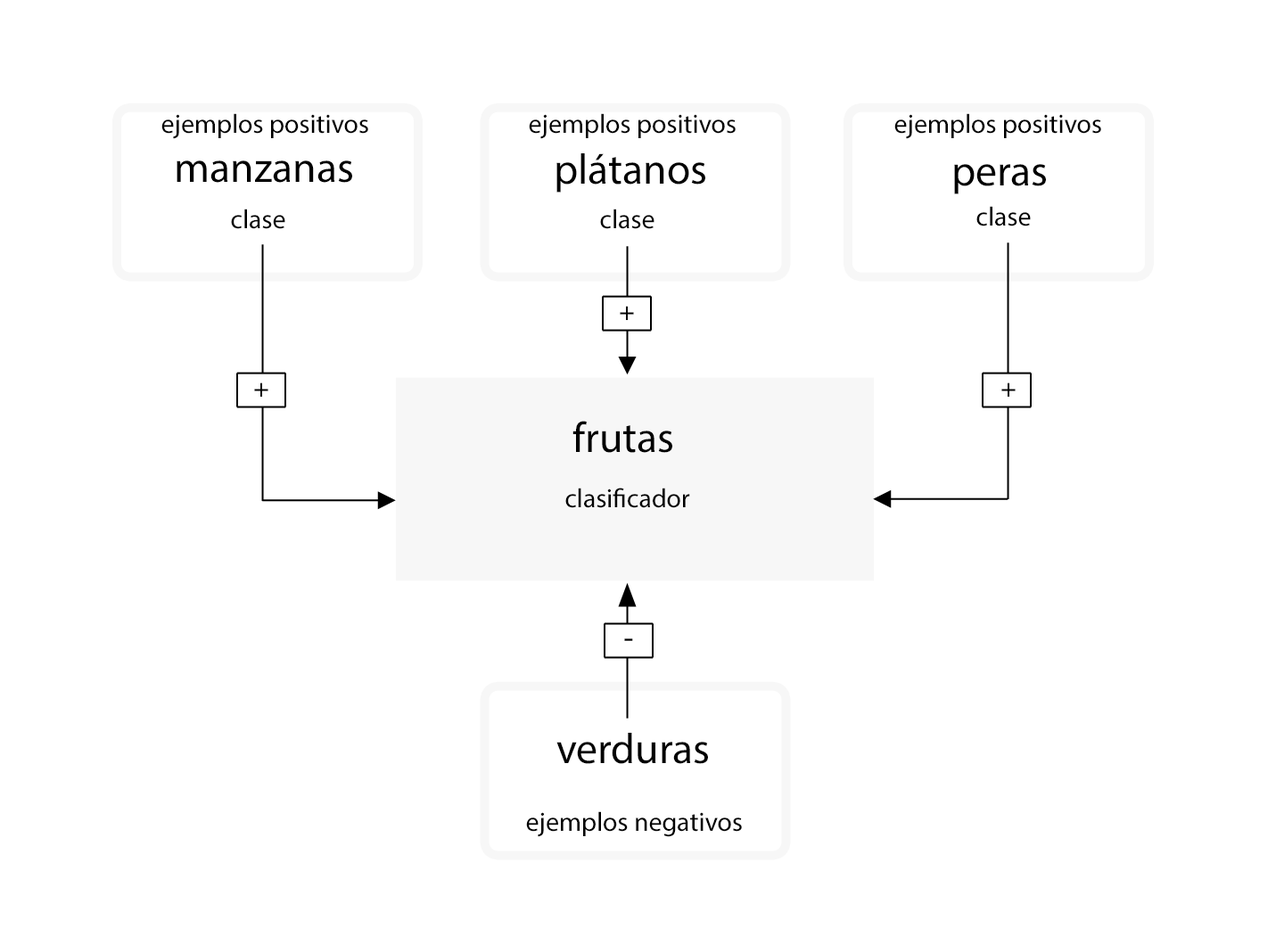
<style>
.page{position:relative;width:1284px;height:928px;background:#ffffff}
.page>*{position:absolute;margin:0}
.t1{font:26.8px "MyriadPro-Regular";color:#000000}
.t2{font:42.8px "MyriadPro-Regular";color:#000000}
.t3{font:26.8px "HelvNeueforIBM";color:#000000}
</style>
<div class="page">
<p class="t1" style="left:161px;top:113px;width:207px;height:26px">ejemplos positivos</p>
<p class="t1" style="left:529px;top:113px;width:207px;height:26px">ejemplos positivos</p>
<p class="t1" style="left:895px;top:113px;width:206px;height:26px">ejemplos positivos</p>
<p class="t2" style="left:177px;top:161px;width:175px;height:22px">manzanas</p>
<p class="t2" style="left:557px;top:153px;width:148px;height:40px">plátanos</p>
<p class="t2" style="left:954px;top:164px;width:92px;height:30px">peras</p>
<p class="t1" style="left:231px;top:209px;width:54px;height:20px">clase</p>
<p class="t1" style="left:600px;top:209px;width:55px;height:20px">clase</p>
<p class="t1" style="left:977px;top:206px;width:54px;height:21px">clase</p>
<p class="t3" style="left:620px;top:306px;width:14px;height:14px">+</p>
<p class="t3" style="left:254px;top:383px;width:14px;height:14px">+</p>
<p class="t3" style="left:1002px;top:383px;width:14px;height:14px">+</p>
<p class="t2" style="left:573px;top:421px;width:99px;height:32px">frutas</p>
<p class="t1" style="left:565px;top:488px;width:125px;height:20px">clasificador</p>
<p class="t3" style="left:624px;top:639px;width:9px;height:2px">-</p>
<p class="t2" style="left:557px;top:733px;width:151px;height:31px">verduras</p>
<p class="t1" style="left:526px;top:812px;width:216px;height:25px">ejemplos negativos</p>
</div>
